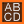
<style>
.page{position:relative;width:24px;height:24px;background:#ff731c}
.page>*{position:absolute;margin:0}
.t1{font:10.9px/9.7px "WBHelveticaNeue-Light";letter-spacing:0.11em}
</style>
<div class="page">
<p class="t1" style="left:4px;top:3px;width:16px;height:18px">AB<br>CD</p>
</div>
